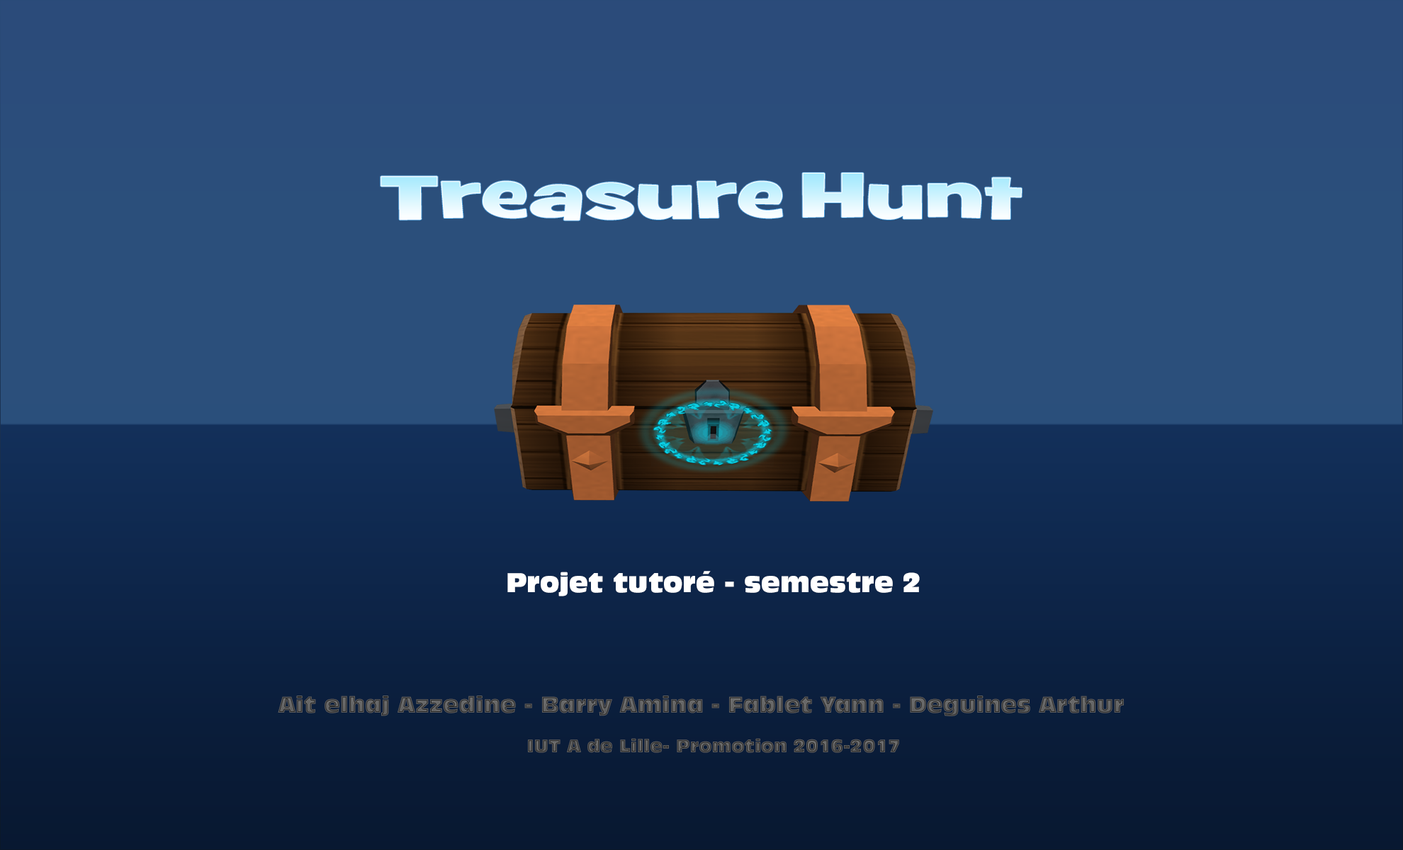
<style>
.page{position:relative;width:1403px;height:850px;background:#2b4f7b}
.page>*{position:absolute;margin:0}
.t1{font:63.8px "GrilledCheeseBTNWideBlk"}
.t2{font:25.5px "Incised901BT-Compact";color:#ffffff}
.t3{font:21.3px "Incised901BT-Compact"}
.t4{font:17px "Incised901BT-Compact"}
</style>
<div class="page">
<p class="t1" style="left:380px;top:173px;width:642px;height:48px">Treasure Hunt</p>
<p class="t2" style="left:507px;top:571px;width:413px;height:25px">Projet tutoré - semestre 2</p>
<p class="t3" style="left:278px;top:696px;width:846px;height:20px">Ait elhaj Azzedine - Barry Amina - Fablet Yann - Deguines Arthur</p>
<p class="t4" style="left:528px;top:738px;width:371px;height:15px">IUT A de Lille- Promotion 2016-2017</p>
</div>
